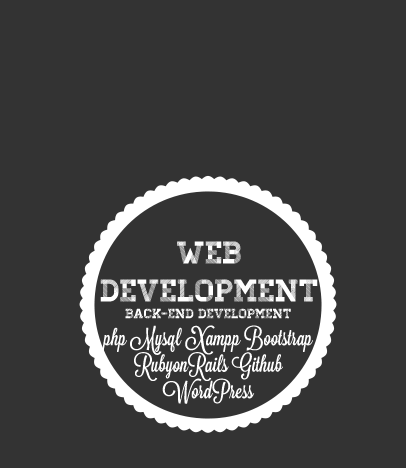
<style>
.page{position:relative;width:406px;height:468px;background:#333333}
.page>*{position:absolute;margin:0}
.t1{font:31.6px "Homestead-Display";color:#ffffff}
.t2{font:13.4px "Homestead-Display";color:#ffffff}
.t3{font:22.1px "Lavanderia-Sturdy";color:#ffffff}
</style>
<div class="page">
<p class="t1" style="left:100px;top:241px;width:218px;height:61px;text-align:center">Web<br>Development</p>
<p class="t2" style="left:125px;top:308px;width:166px;height:11px">Back-end Development</p>
<p class="t3" style="left:102px;top:325px;width:211px;height:79px;text-align:center;rotate:-90deg">php Mysql Xampp Bootstrap<br>RubyonRails Github<br>WordPress</p>
</div>
